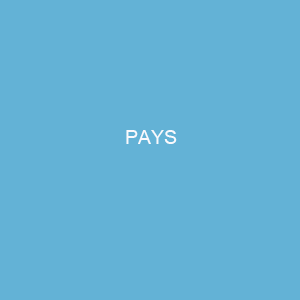
<style>
.page{position:relative;width:300px;height:300px;background:#63b2d6}
.page>*{position:absolute;margin:0}
.t1{font:30px "CordiaUPC-Bold";color:#faf9fc}
</style>
<div class="page">
<p class="t1" style="left:126px;top:130px;width:51px;height:14px">PAYS</p>
</div>
